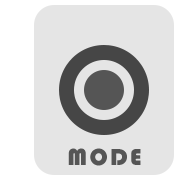
<style>
.page{position:relative;width:180px;height:180px;background:#e5e5e5}
.page>*{position:absolute;margin:0}
.t1{font:24px "Bauhaus93";letter-spacing:0.1em;color:#555555}
</style>
<div class="page">
<p class="t1" style="left:68px;top:148px;width:73px;height:18px">MODE</p>
</div>
